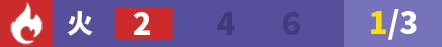
<style>
.page{position:relative;width:442px;height:47px;background:#554f9c}
.page>*{position:absolute;margin:0}
.t1{font:25.8px "SourceHanSansSC-Heavy";color:#ffffff}
.t2{font:30.9px "SourceHanSansSC-Heavy";color:#ffffff}
.t3{font:30.9px "SourceHanSansSC-Heavy";color:#403b78}
.t4{font:30.9px "SourceHanSansSC-Heavy";color:#413c79}
.t5{font:30.9px "SourceHanSansSC-Heavy";color:#ffde00}
</style>
<div class="page">
<p class="t1" style="left:67px;top:11px;width:26px;height:25px">火</p>
<p class="t2" style="left:133px;top:12px;width:17px;height:23px">2</p>
<p class="t3" style="left:217px;top:12px;width:18px;height:23px">4</p>
<p class="t4" style="left:283px;top:12px;width:17px;height:23px">6</p>
<p class="t2" style="left:371px;top:9px;width:46px;height:31px"><span class="t5">1</span>/3</p>
</div>
